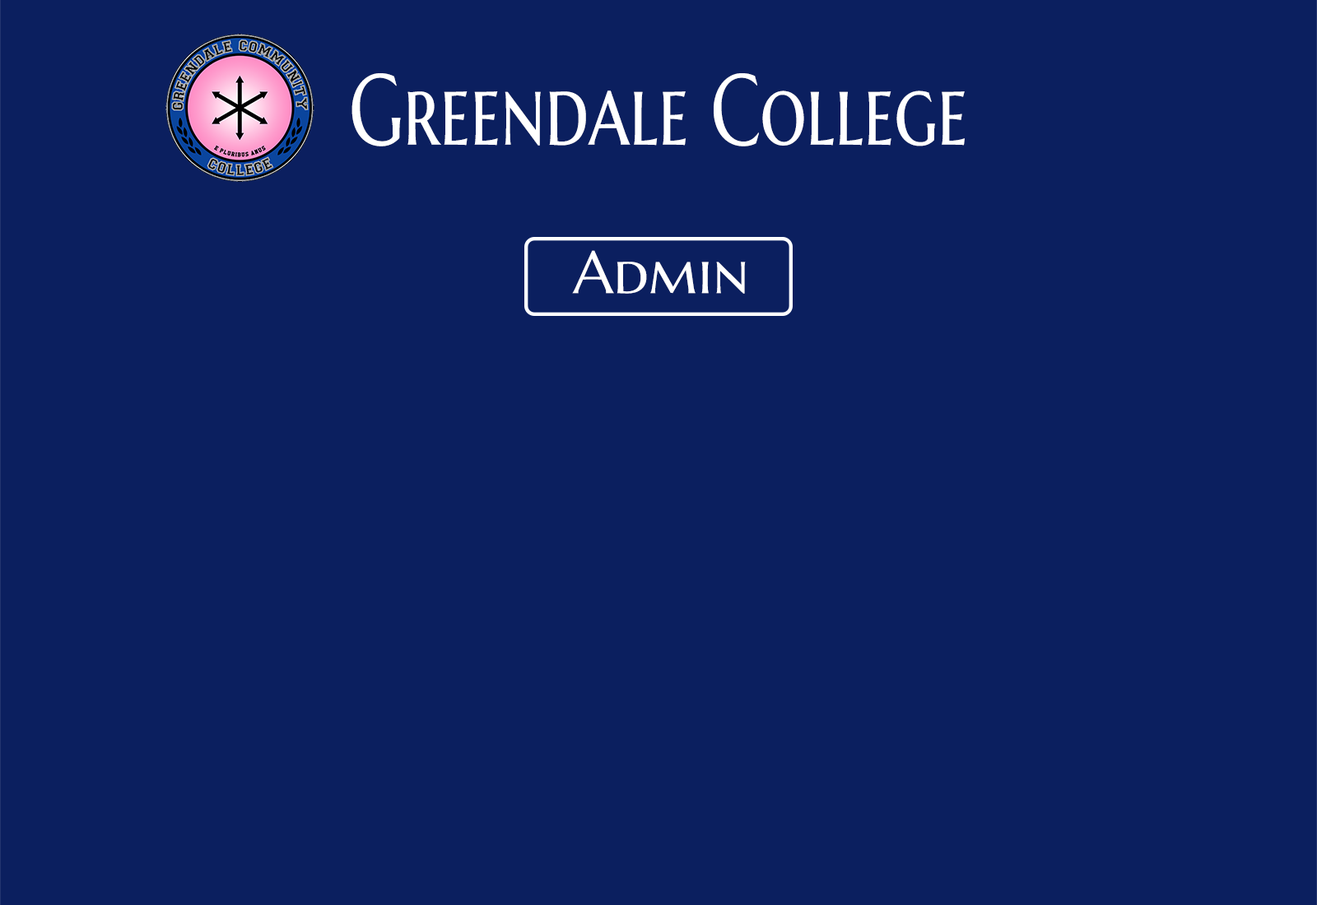
<style>
.page{position:relative;width:1317px;height:905px;background:#0b1f5f}
.page>*{position:absolute;margin:0}
.t1{font:100.3px "MarcellusSC-Regular";color:#ffffff;scale:0.73 1}
.t2{font:59.3px "MarcellusSC-Regular";color:#ffffff}
</style>
<div class="page">
<p class="t1" style="left:351px;top:73px;width:614px;height:74px">Greendale College</p>
<p class="t2" style="left:572px;top:250px;width:174px;height:44px">Admin</p>
</div>
